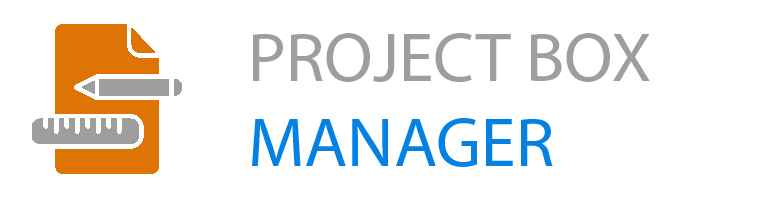
<style>
.page{position:relative;width:768px;height:203px;background:#ffffff}
.page>*{position:absolute;margin:0}
.t1{font:70.4px "MyriadPro-Regular";color:#9e9e9e}
.t2{font:70.4px "MyriadPro-Regular";color:#0481e2}
</style>
<div class="page">
<p class="t1" style="left:252px;top:33px;width:398px;height:134px">PROJECT BOX <br><span class="t2">MANAGER</span></p>
</div>
